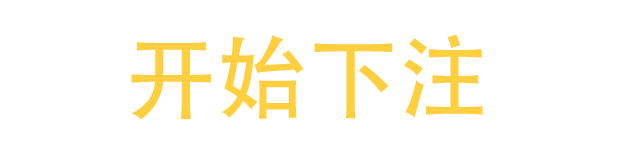
<style>
.page{position:relative;width:629px;height:152px;background:#ffffff}
.page>*{position:absolute;margin:0}
.t1{font:91px "AdobeHeitiStd-Regular";color:#ffcf40}
</style>
<div class="page">
<p class="t1" style="left:131px;top:34px;width:352px;height:86px">开始下注</p>
</div>
